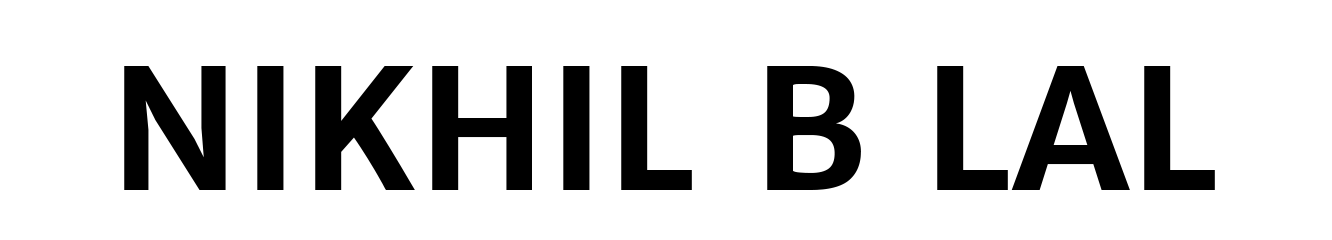
<style>
.page{position:relative;width:1332px;height:240px;background:#ffffff}
.page>*{position:absolute;margin:0}
.t1{font:166.7px "MerriweatherSans-Bold";color:#000000}
</style>
<div class="page">
<p class="t1" style="left:124px;top:66px;width:1091px;height:124px">NIKHIL B LAL</p>
</div>
